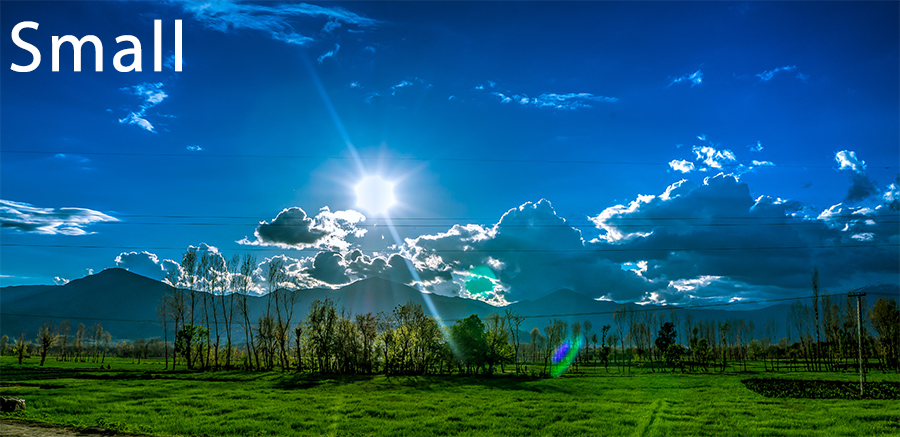
<style>
.page{position:relative;width:900px;height:437px}
.page>*{position:absolute;margin:0}
.t1{font:72px "MyriadPro-Regular";letter-spacing:0.025em;color:#ffffff;font-weight:bold}
</style>
<div class="page">
<p class="t1" style="left:10px;top:19px;width:172px;height:53px">Small</p>
</div>
